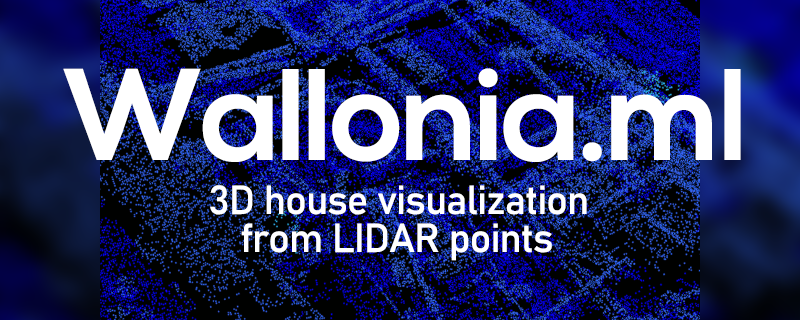
<style>
.page{position:relative;width:800px;height:320px}
.page>*{position:absolute;margin:0}
.t1{font:130px "NexaBold";letter-spacing:-0.025em;color:#ffffff}
.t2{font:40px "Bahnschrift";letter-spacing:-0.025em;color:#ffffff}
</style>
<div class="page">
<p class="t1" style="left:63px;top:68px;width:678px;height:94px">Wallonia.ml</p>
<p class="t2" style="left:210px;top:185px;width:377px;height:30px">3D house visualization</p>
<p class="t2" style="left:241px;top:223px;width:311px;height:38px">from LIDAR points</p>
</div>
